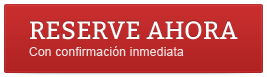
<style>
.page{position:relative;width:267px;height:77px}
.page>*{position:absolute;margin:0}
.t1{font:25px "Bitter-Regular";color:#ffffff}
.t2{font:12px "ArialMT";letter-spacing:0.02em;color:#eddddd}
</style>
<div class="page">
<p class="t1" style="left:30px;top:21px;width:208px;height:19px">RESERVE AHORA</p>
<p class="t2" style="left:29px;top:46px;width:155px;height:10px">Con confirmación inmediata</p>
</div>
